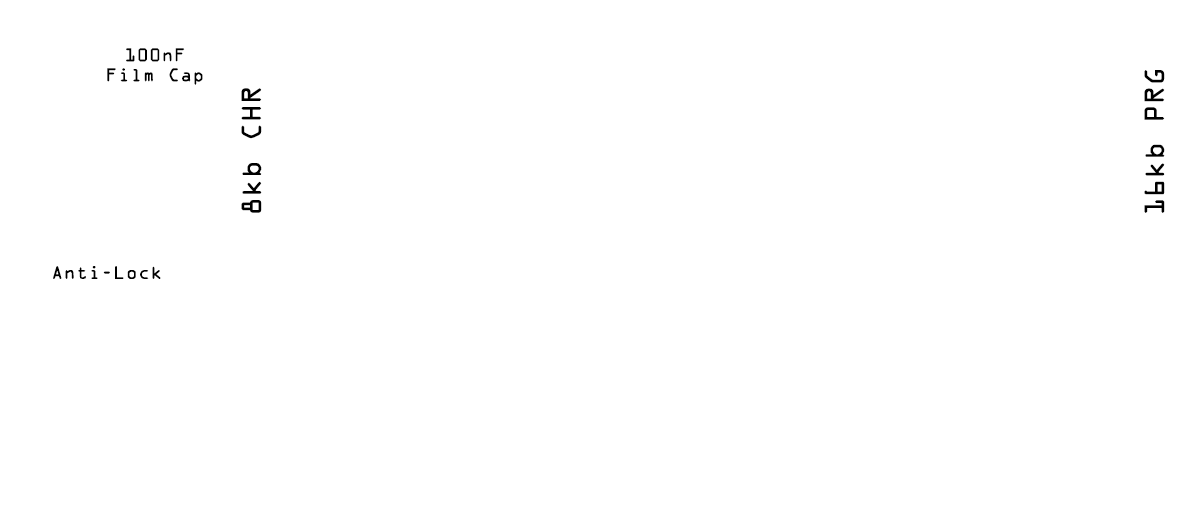
<style>
.page{position:relative;width:1196px;height:505px;background:#ffffff}
.page>*{position:absolute;margin:0}
.t1{font:16.7px "OCRAStd";letter-spacing:0.025em;color:#000000}
.t2{font:25px "OCRAStd";letter-spacing:0.025em;color:#000000}
</style>
<div class="page">
<p class="t1" style="left:107px;top:48px;width:96px;height:37px;text-align:center">100nF<br>Film Cap</p>
<p class="t2" style="left:1144px;top:70px;width:21px;height:143px;rotate:-90deg">16kb PRG</p>
<p class="t2" style="left:241px;top:88px;width:21px;height:125px;rotate:-90deg">8kb CHR</p>
<p class="t1" style="left:53px;top:266px;width:108px;height:13px">Anti-Lock</p>
</div>
